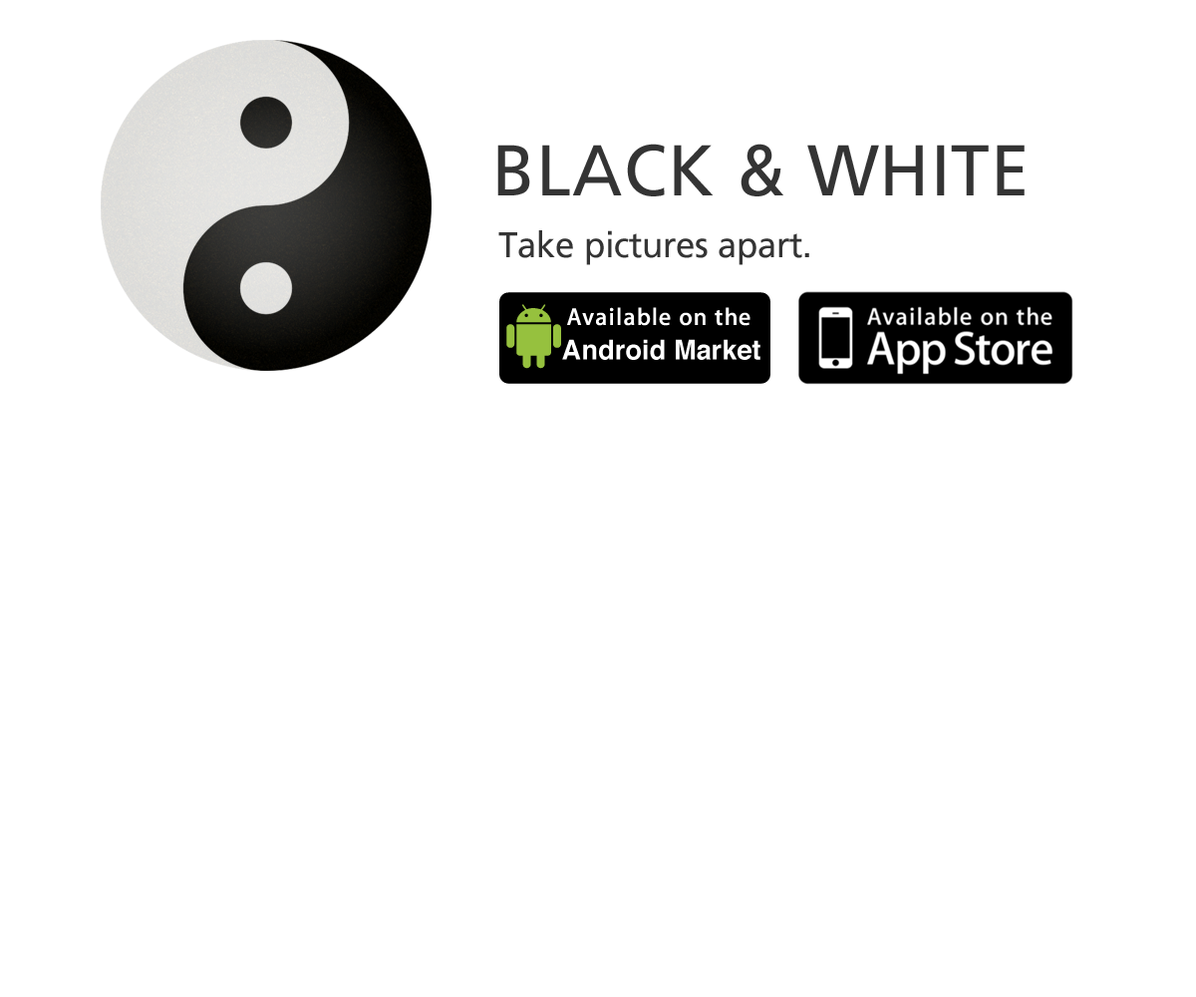
<style>
.page{position:relative;width:1196px;height:997px;background:#ffffff}
.page>*{position:absolute;margin:0}
.t1{font:71.8px "Frutiger-Roman";color:#343434}
.t2{font:35.9px "Frutiger-Roman";letter-spacing:-0.025em;color:#343434}
</style>
<div class="page">
<p class="t1" style="left:497px;top:144px;width:528px;height:52px">BLACK &amp; WHITE</p>
<p class="t2" style="left:498px;top:230px;width:311px;height:35px">Take pictures apart.</p>
</div>
